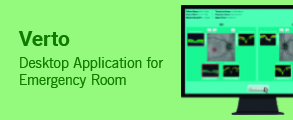
<style>
.page{position:relative;width:293px;height:120px;background:#94fa7e}
.page>*{position:absolute;margin:0}
.t1{font:20.8px "Roboto-Bold";color:#127a00}
.t2{font:14.6px "NewsGothicBT-Roman";color:#127a00}
</style>
<div class="page">
<p class="t1" style="left:18px;top:31px;width:52px;height:15px">Verto</p>
<p class="t2" style="left:20px;top:57px;width:144px;height:31px">Desktop Application for<br>Emergency Room</p>
</div>
